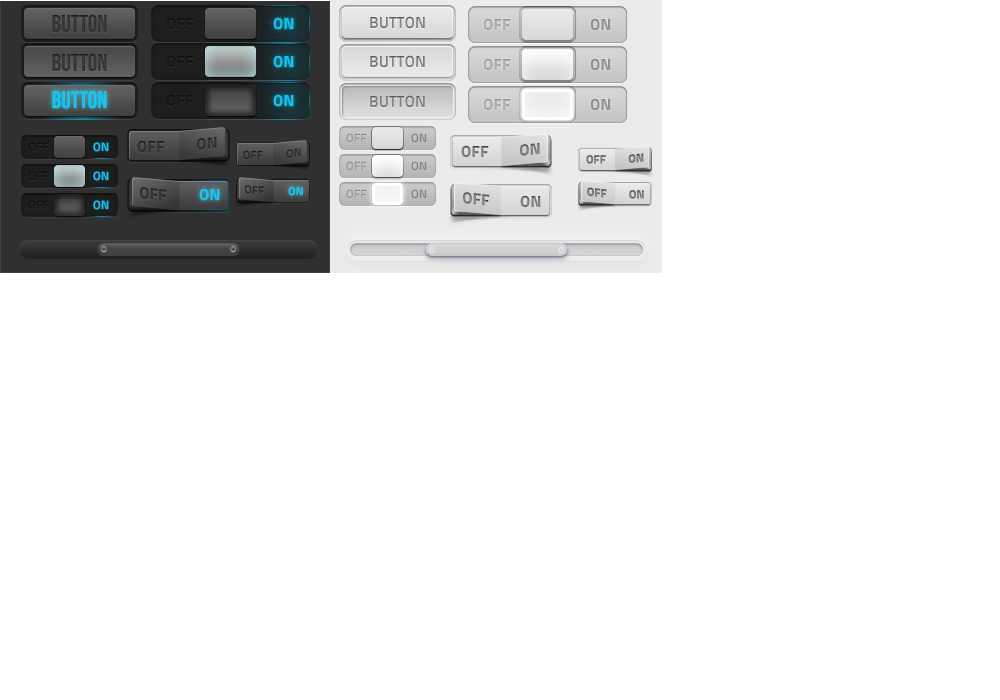
<style>
.page{position:relative;width:1000px;height:700px;background:#ffffff}
.page>*{position:absolute;margin:0}
.t1{font:24.3px "BebasNeue";color:#313131}
.t2{font:16px "TitilliumMaps29L-999wt";color:#171717}
.t3{font:16px "TitilliumMaps29L-999wt";color:#00cafc}
.t4{font:16px "TitilliumMaps29L-800wt";color:#838383}
.t5{font:16px "TitilliumMaps29L-999wt";color:#acacac}
.t6{font:16px "TitilliumMaps29L-999wt";color:#909090}
.t7{font:24.3px "BebasNeue";color:#00ccff}
.t8{font:16px "TitilliumMaps29L-999wt";color:#313131}
.t9{font:12px "TitilliumMaps29L-800wt";color:#989898}
.t10{font:12px "TitilliumMaps29L-800wt";color:#858585}
.t11{font:12px "TitilliumMaps29L-800wt";color:#121212}
.t12{font:12px "TitilliumMaps29L-800wt";color:#00ccff}
.t13{font:11.7px "TitilliumMaps29L-999wt";color:#313131}
.t14{font:16px "TitilliumMaps29L-999wt";color:#7c7c7c}
.t15{font:16px "TitilliumMaps29L-999wt";color:#818181}
.t16{font:11.6px "TitilliumMaps29L-999wt";color:#797979}
.t17{font:11.6px "TitilliumMaps29L-999wt";color:#7b7b7b}
.t18{font:16px "TitilliumMaps29L-999wt";color:#00ccff}
.t19{font:11.7px "TitilliumMaps29L-999wt";color:#00ccff}
.t20{font:16px "TitilliumMaps29L-999wt";color:#7e7e7e}
.t21{font:16px "TitilliumMaps29L-999wt";color:#7d7d7d}
.t22{font:11.6px "TitilliumMaps29L-999wt";color:#7c7c7c}
</style>
<div class="page">
<p class="t1" style="left:52px;top:14px;width:55px;height:19px">BUTTON</p>
<p class="t2" style="left:166px;top:17px;width:28px;height:13px">OFF</p>
<p class="t3" style="left:273px;top:17px;width:21px;height:13px">ON</p>
<p class="t4" style="left:370px;top:16px;width:55px;height:13px">BUTTON</p>
<p class="t5" style="left:483px;top:18px;width:28px;height:13px">OFF</p>
<p class="t6" style="left:590px;top:18px;width:21px;height:13px">ON</p>
<p class="t1" style="left:52px;top:53px;width:55px;height:19px">BUTTON</p>
<p class="t2" style="left:166px;top:55px;width:28px;height:13px">OFF</p>
<p class="t3" style="left:273px;top:55px;width:21px;height:13px">ON</p>
<p class="t4" style="left:370px;top:55px;width:55px;height:13px">BUTTON</p>
<p class="t5" style="left:483px;top:58px;width:28px;height:13px">OFF</p>
<p class="t6" style="left:590px;top:58px;width:21px;height:13px">ON</p>
<p class="t7" style="left:52px;top:90px;width:55px;height:19px">BUTTON</p>
<p class="t2" style="left:166px;top:94px;width:28px;height:13px">OFF</p>
<p class="t3" style="left:273px;top:94px;width:21px;height:13px">ON</p>
<p class="t4" style="left:370px;top:95px;width:55px;height:13px">BUTTON</p>
<p class="t5" style="left:483px;top:98px;width:28px;height:13px">OFF</p>
<p class="t6" style="left:590px;top:98px;width:21px;height:13px">ON</p>
<p class="t8" style="left:197px;top:137px;width:20px;height:13px;rotate:-6deg">ON</p>
<p class="t9" style="left:346px;top:133px;width:21px;height:10px">OFF</p>
<p class="t10" style="left:411px;top:133px;width:16px;height:10px">ON</p>
<p class="t11" style="left:28px;top:142px;width:21px;height:10px">OFF</p>
<p class="t12" style="left:93px;top:142px;width:16px;height:10px">ON</p>
<p class="t8" style="left:137px;top:140px;width:28px;height:13px">OFF</p>
<p class="t13" style="left:243px;top:150px;width:20px;height:10px">OFF</p>
<p class="t13" style="left:286px;top:148px;width:15px;height:10px;rotate:-6deg">ON</p>
<p class="t14" style="left:461px;top:145px;width:28px;height:13px">OFF</p>
<p class="t15" style="left:520px;top:143px;width:20px;height:13px;rotate:-6deg">ON</p>
<p class="t9" style="left:346px;top:161px;width:21px;height:10px">OFF</p>
<p class="t10" style="left:411px;top:161px;width:16px;height:10px">ON</p>
<p class="t16" style="left:586px;top:155px;width:20px;height:9px">OFF</p>
<p class="t17" style="left:628px;top:153px;width:16px;height:10px;rotate:-6deg">ON</p>
<p class="t11" style="left:28px;top:171px;width:21px;height:10px">OFF</p>
<p class="t12" style="left:93px;top:171px;width:16px;height:10px">ON</p>
<p class="t13" style="left:244px;top:185px;width:20px;height:10px;rotate:6deg">OFF</p>
<p class="t8" style="left:140px;top:187px;width:27px;height:14px;rotate:6deg">OFF</p>
<p class="t18" style="left:199px;top:188px;width:21px;height:13px">ON</p>
<p class="t19" style="left:288px;top:186px;width:15px;height:10px">ON</p>
<p class="t9" style="left:346px;top:189px;width:21px;height:10px">OFF</p>
<p class="t10" style="left:411px;top:189px;width:16px;height:10px">ON</p>
<p class="t20" style="left:463px;top:192px;width:27px;height:14px;rotate:6deg">OFF</p>
<p class="t21" style="left:520px;top:195px;width:21px;height:13px">ON</p>
<p class="t22" style="left:587px;top:187px;width:20px;height:11px;rotate:6deg">OFF</p>
<p class="t22" style="left:629px;top:190px;width:15px;height:9px">ON</p>
<p class="t11" style="left:28px;top:200px;width:21px;height:10px">OFF</p>
<p class="t12" style="left:93px;top:200px;width:16px;height:10px">ON</p>
</div>
